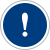
<style>
.page{position:relative;width:50px;height:50px;background:#003d7f}
.page>*{position:absolute;margin:0}
.t1{font:37.5px "KannadaMN-Bold";letter-spacing:-0.01em;color:#ffffff}
</style>
<div class="page">
<p class="t1" style="left:22px;top:12px;width:6px;height:25px">!</p>
</div>
